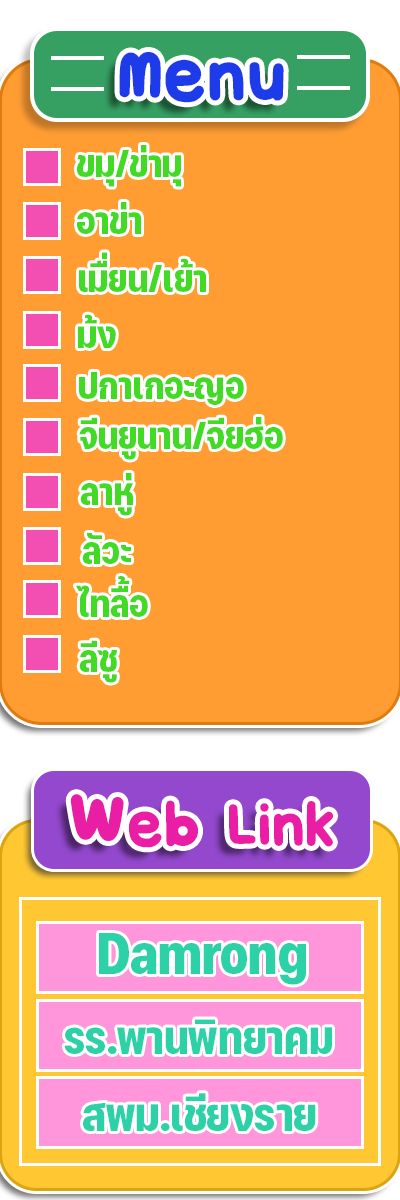
<style>
.page{position:relative;width:400px;height:1200px;background:#ff9d33}
.page>*{position:absolute;margin:0}
.t1{font:88.5px "SnowBold";color:#1e3be9}
.t2{font:37.5px "FCIconicNoncommercial-BoldCondensed";color:#43da26}
.t3{font:75px "SnowBold";color:#e91ea4}
.t4{font:100px "SnowBold";color:#e91ea4}
.t5{font:58.3px "FCIconicNoncommercial-BoldCondensed";color:#2dd1a8}
.t6{font:45.8px "FCIconicNoncommercial-BoldCondensed";color:#2dd1a8}
</style>
<div class="page">
<p class="t1" style="left:119px;top:52px;width:165px;height:51px">Menu</p>
<p class="t2" style="left:77px;top:145px;width:104px;height:42px">ขมุ/ข่ามุ</p>
<p class="t2" style="left:77px;top:202px;width:64px;height:32px">อาข่า</p>
<p class="t2" style="left:79px;top:252px;width:127px;height:40px">เมื่ยน/เย้า</p>
<p class="t2" style="left:78px;top:314px;width:38px;height:34px">ม้ง</p>
<p class="t2" style="left:79px;top:372px;width:165px;height:33px">ปกาเกอะญอ</p>
<p class="t2" style="left:79px;top:417px;width:204px;height:43px">จีนยูนาน/จียฮ่อ</p>
<p class="t2" style="left:80px;top:473px;width:53px;height:43px">ลาหู่</p>
<p class="t2" style="left:82px;top:533px;width:49px;height:31px">ลัวะ</p>
<p class="t2" style="left:75px;top:576px;width:73px;height:41px">ไทลื้อ</p>
<p class="t2" style="left:79px;top:640px;width:38px;height:43px">ลีซู</p>
<p class="t3" style="left:70px;top:794px;width:264px;height:54px"><span class="t4">W</span>eb Link</p>
<p class="t5" style="left:99px;top:933px;width:207px;height:52px">Damrong</p>
<p class="t6" style="left:64px;top:1019px;width:268px;height:35px">รร.พานพิทยาคม</p>
<p class="t6" style="left:83px;top:1093px;width:233px;height:38px">สพม.เชียงราย</p>
</div>
